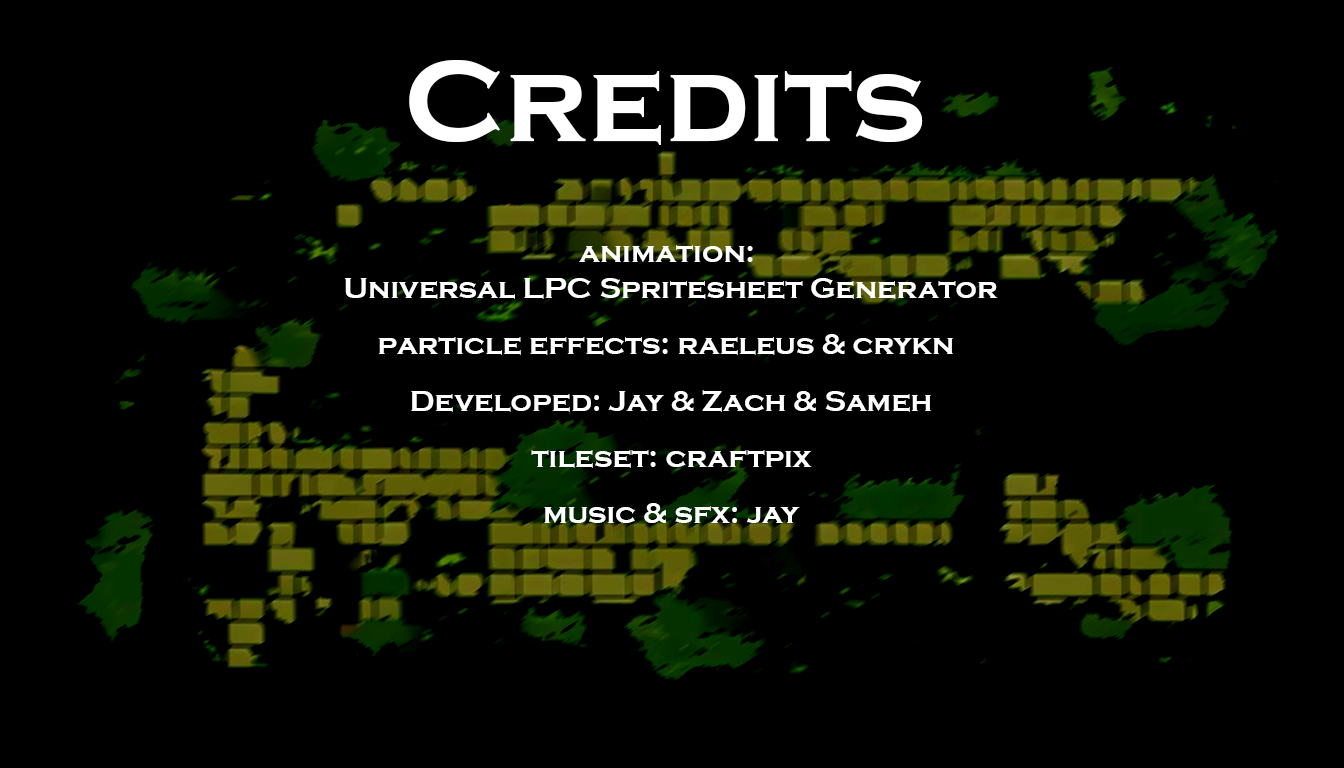
<style>
.page{position:relative;width:1344px;height:768px;background:#000000}
.page>*{position:absolute;margin:0}
.t1{font:120px "CopperplateGothic-Bold";color:#ffffff}
.t2{font:30px "CopperplateGothic-Bold";color:#ffffff}
</style>
<div class="page">
<p class="t1" style="left:409px;top:60px;width:514px;height:85px">Credits</p>
<p class="t2" style="left:344px;top:245px;width:654px;height:54px;text-align:center">animation: <br>Universal LPC Spritesheet Generator</p>
<p class="t2" style="left:378px;top:334px;width:575px;height:21px">particle effects: raeleus &amp; crykn</p>
<p class="t2" style="left:411px;top:390px;width:520px;height:22px">Developed: Jay &amp; Zach &amp; Sameh</p>
<p class="t2" style="left:531px;top:450px;width:281px;height:18px">tileset: craftpix</p>
<p class="t2" style="left:544px;top:503px;width:256px;height:20px">music &amp; sfx: jay</p>
</div>
